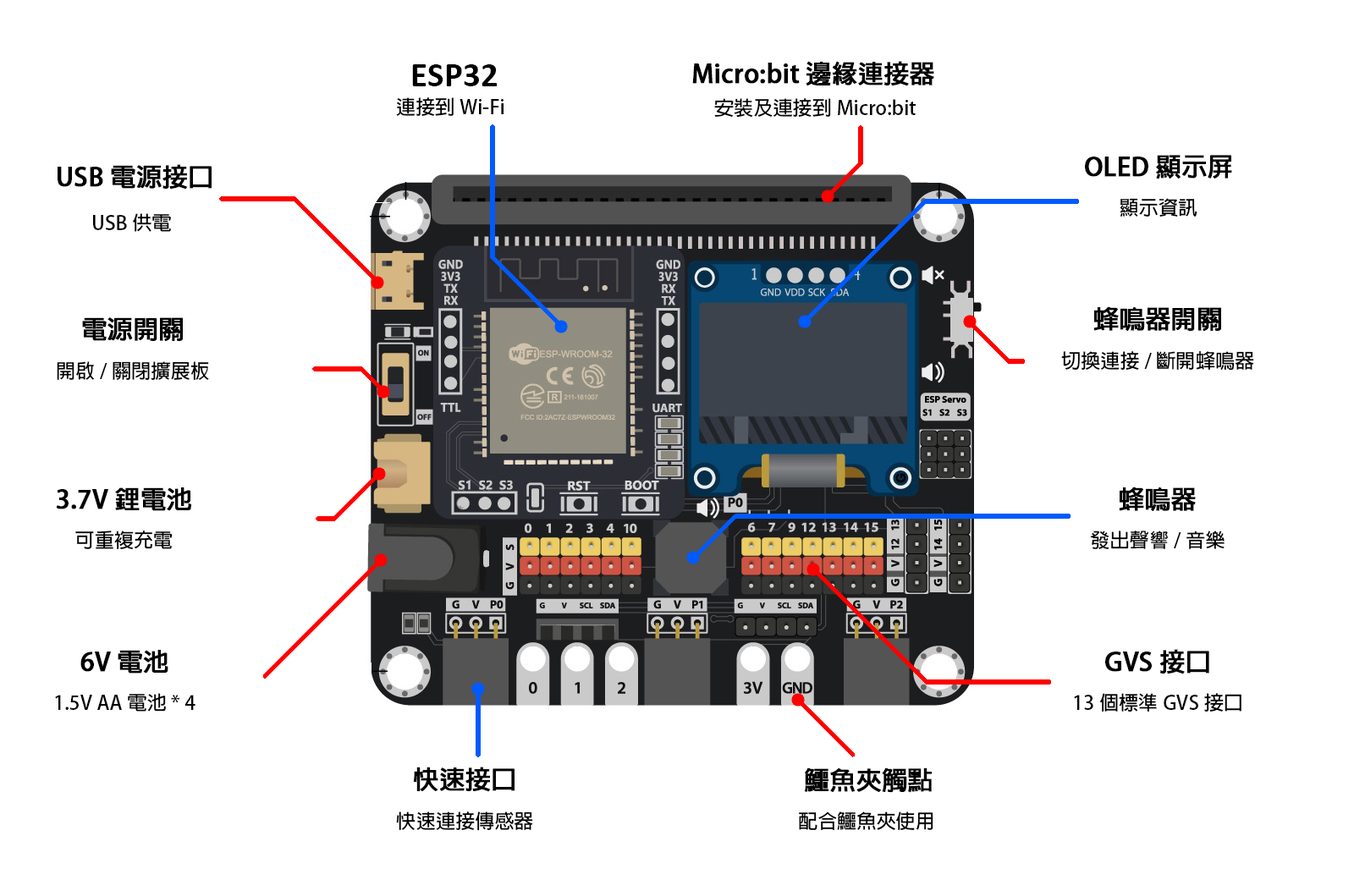
<style>
.page{position:relative;width:1354px;height:880px;background:#ffffff}
.page>*{position:absolute;margin:0}
.t1{font:25.2px "AdobeFanHeitiStd-Bold";color:#000000;font-weight:bold}
.t2{font:19.6px "AdobeFanHeitiStd-Bold";color:#000000}
</style>
<div class="page">
<p class="t1" style="left:692px;top:61px;width:243px;height:25px">Micro:bit 邊緣連接器</p>
<p class="t2" style="left:396px;top:97px;width:108px;height:19px">連接到Wi-Fi</p>
<p class="t2" style="left:714px;top:98px;width:202px;height:20px">安裝及連接到Micro:bit</p>
<p class="t1" style="left:1085px;top:155px;width:148px;height:62px;text-align:center">OLED 顯示屏<br><span class="t2">顯示資訊</span></p>
<p class="t1" style="left:58px;top:164px;width:154px;height:68px;text-align:center">USB電源接口<br><span class="t2">USB供電</span></p>
<p class="t2" style="left:57px;top:317px;width:152px;height:63px;text-align:center"><span class="t1">電源開關<br></span>開啟/關閉擴展板</p>
<p class="t2" style="left:1062px;top:306px;width:193px;height:65px;text-align:center"><span class="t1">蜂鳴器開關<br></span>切換連接/斷開蜂鳴器</p>
<p class="t1" style="left:56px;top:488px;width:135px;height:62px;text-align:center">3.7V 鋰電池<br><span class="t2">可重複充電</span></p>
<p class="t2" style="left:1090px;top:487px;width:135px;height:62px;text-align:center"><span class="t1">蜂鳴器<br></span>發出聲響/音樂</p>
<p class="t2" style="left:55px;top:650px;width:141px;height:62px;text-align:center"><span class="t1">6V 電池<br></span>1.5V AA電池 * 4</p>
<p class="t2" style="left:1074px;top:649px;width:168px;height:64px;text-align:center"><span class="t1">GVS 接口<br></span>13個標準GVS接口</p>
<p class="t2" style="left:396px;top:767px;width:137px;height:64px;text-align:center"><span class="t1">快速接口<br></span>快速連接傳感器</p>
<p class="t2" style="left:799px;top:768px;width:135px;height:62px;text-align:center"><span class="t1">鱷魚夾觸點<br></span>配合鱷魚夾使用</p>
</div>
